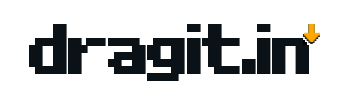
<style>
.page{position:relative;width:342px;height:99px;background:#ffffff}
.page>*{position:absolute;margin:0}
.t1{font:69.8px "RetroVilleNC";letter-spacing:-0.17em;color:#0a1218;font-weight:bold;scale:0.86 1}
.t2{font:69.8px "RetroVilleNC";letter-spacing:-0.17em;color:#0a1218;font-weight:bold;scale:0.85 1}
</style>
<div class="page">
<p class="t1" style="left:29px;top:24px;width:280px;height:57px">dragit.<span class="t2">in</span></p>
</div>
